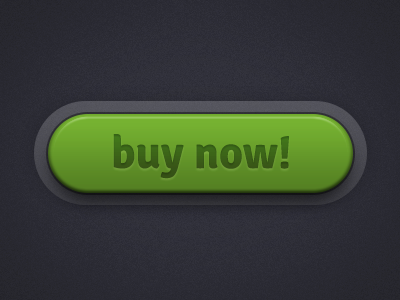
<style>
.page{position:relative;width:400px;height:300px}
.page>*{position:absolute;margin:0}
.t1{font:46px "Signika-Bold";color:#3a5f18}
</style>
<div class="page">
<p class="t1" style="left:113px;top:134px;width:176px;height:45px">buy now!</p>
</div>
